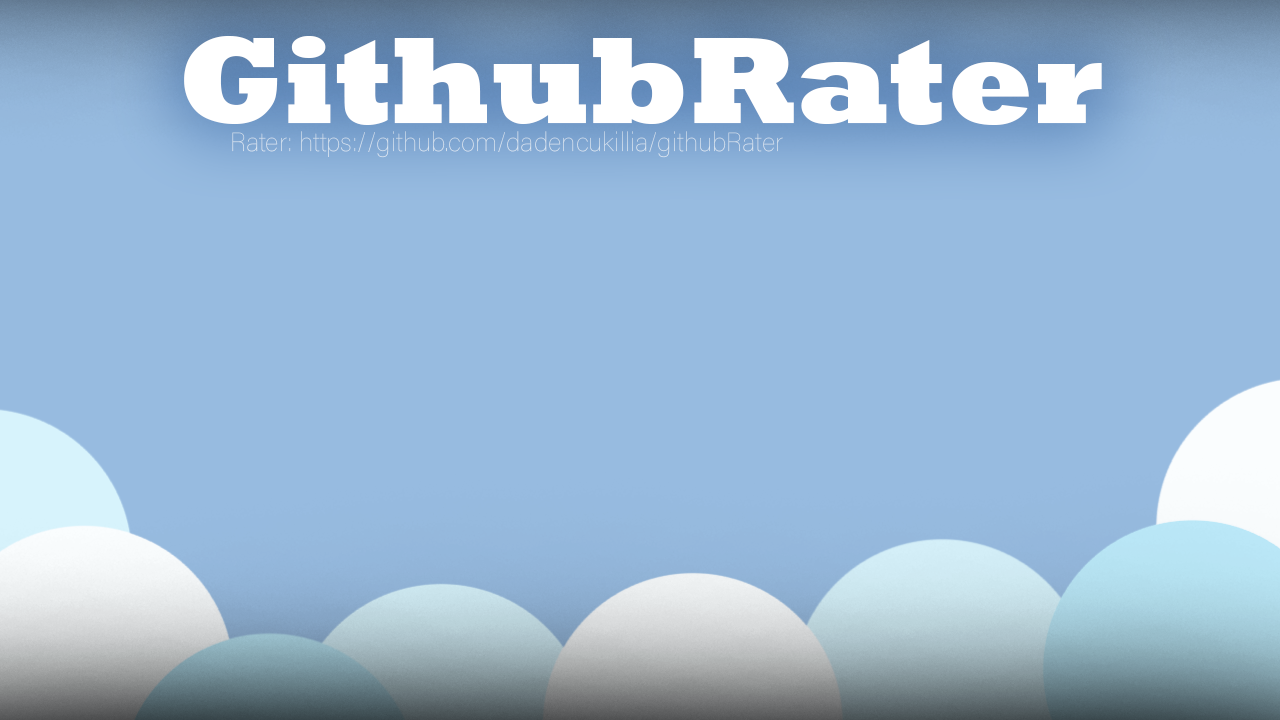
<style>
.page{position:relative;width:1280px;height:720px;background:#97bbe0}
.page>*{position:absolute;margin:0}
.t1{font:125px "Rockwell-ExtraBold";color:#ffffff}
.t2{font:26.1px "AcuminConcept-Thin";color:#dbe6f1}
</style>
<div class="page">
<p class="t1" style="left:184px;top:36px;width:918px;height:89px">GithubRater</p>
<p class="t2" style="left:232px;top:131px;width:551px;height:27px">Rater: https://github.com/dadencukillia/githubRater</p>
</div>
